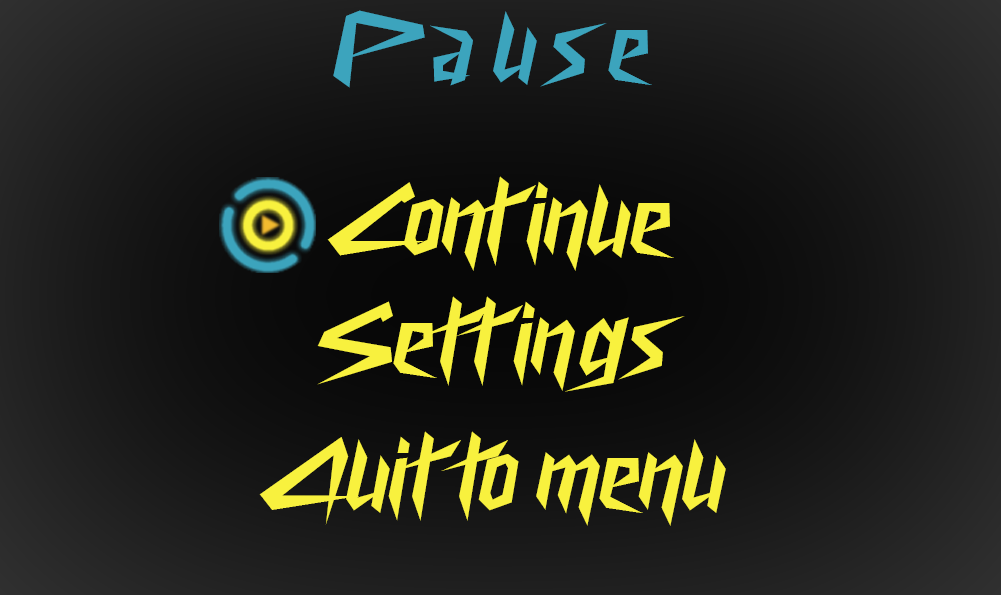
<style>
.page{position:relative;width:1001px;height:595px}
.page>*{position:absolute;margin:0}
.t1{font:100px "CyberwayRiders";color:#3ca4bd}
.t2{font:100px "CyberwayRiders";color:#f8f13e}
</style>
<div class="page">
<p class="t1" style="left:333px;top:10px;width:319px;height:78px">P a u s e</p>
<p class="t2" style="left:327px;top:176px;width:347px;height:95px">Continue</p>
<p class="t2" style="left:317px;top:296px;width:368px;height:96px">Settings</p>
<p class="t2" style="left:259px;top:431px;width:467px;height:95px">Quit to menu</p>
</div>
